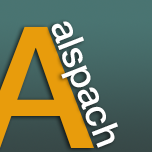
<style>
.page{position:relative;width:152px;height:152px}
.page>*{position:absolute;margin:0}
.t1{font:37.1px "HelveticaNeueLTStd-Md";color:#ffffff}
</style>
<div class="page">
<p class="t1" style="left:51px;top:21px;width:67px;height:127px;rotate:69deg">alspach</p>
</div>
